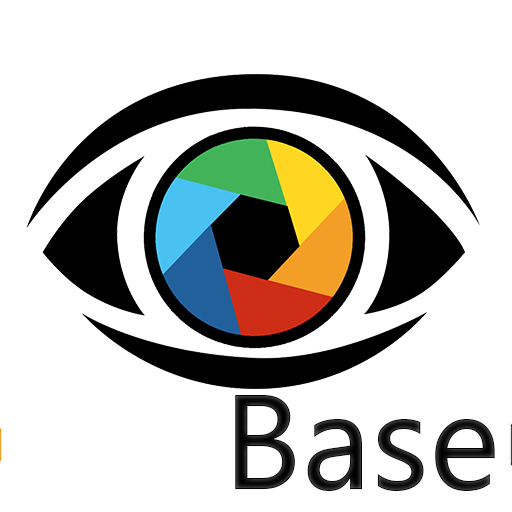
<style>
.page{position:relative;width:512px;height:512px;background:#ffffff}
.page>*{position:absolute;margin:0}
.t1{font:125px "MicrosoftYaHei";color:#161616}
</style>
<div class="page">
<p class="t1" style="left:235px;top:395px;width:260px;height:96px">Base</p>
</div>
